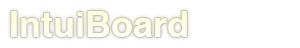
<style>
.page{position:relative;width:300px;height:48px;background:#ffffff}
.page>*{position:absolute;margin:0}
.t1{font:36px "Helvetica-Bold";color:#fefee3}
</style>
<div class="page">
<p class="t1" style="left:11px;top:11px;width:176px;height:26px">IntuiBoard</p>
</div>
